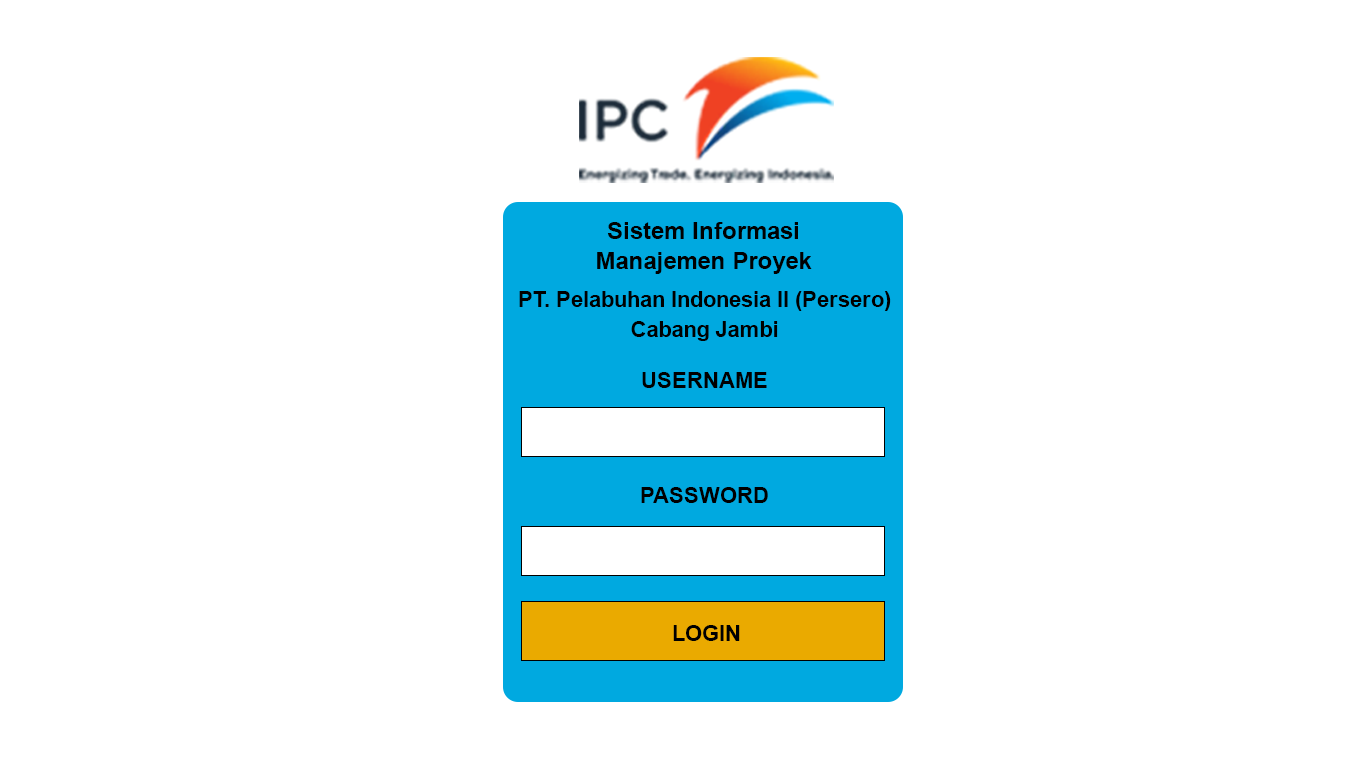
<style>
.page{position:relative;width:1366px;height:768px;background:#ffffff}
.page>*{position:absolute;margin:0}
.t1{font:24px/30px "Arial-BoldMT";color:#000000}
.t2{font:22px "Arial-BoldMT";color:#000000}
</style>
<div class="page">
<p class="t1" style="left:597px;top:222px;width:215px;height:52px;text-align:center">Sistem Informasi<br>Manajemen Proyek</p>
<p class="t2" style="left:519px;top:291px;width:372px;height:20px">PT. Pelabuhan Indonesia II (Persero)</p>
<p class="t2" style="left:631px;top:321px;width:147px;height:20px">Cabang Jambi</p>
<p class="t2" style="left:642px;top:372px;width:125px;height:16px">USERNAME</p>
<p class="t2" style="left:641px;top:487px;width:127px;height:16px">PASSWORD</p>
<p class="t2" style="left:673px;top:625px;width:67px;height:16px">LOGIN</p>
</div>
